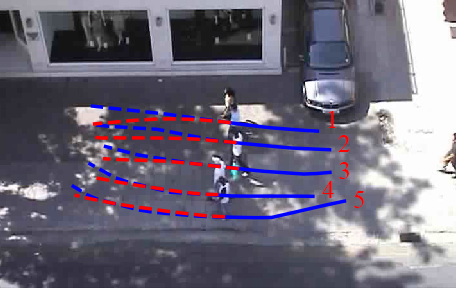
<style>
.page{position:relative;width:456px;height:288px}
.page>*{position:absolute;margin:0}
.t1{font:25px "TimesNewRomanPSMT";color:#ff0000}
</style>
<div class="page">
<p class="t1" style="left:329px;top:111px;width:7px;height:17px">1</p>
<p class="t1" style="left:338px;top:135px;width:12px;height:17px">2</p>
<p class="t1" style="left:339px;top:162px;width:10px;height:17px">3</p>
<p class="t1" style="left:322px;top:181px;width:12px;height:17px">4</p>
<p class="t1" style="left:354px;top:191px;width:10px;height:17px">5</p>
</div>
